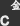
<style>
.page{position:relative;width:20px;height:26px;background:#333333}
.page>*{position:absolute;margin:0}
.t1{font:12px "DFKaiShu-SB-Estd-BF";color:#ececec;font-weight:bold}
.t2{font:18px "ArialMT";color:#ececec;font-weight:bold}
</style>
<div class="page">
<p class="t1" style="left:10px;top:0px;width:12px;height:10px">金</p>
<p class="t2" style="left:0px;top:15px;width:10px;height:11px">c</p>
</div>
